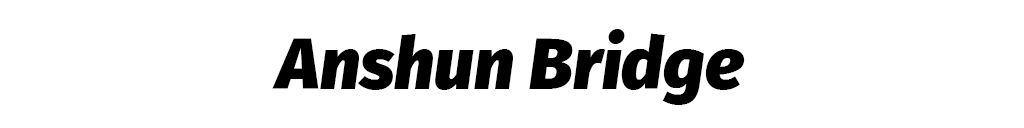
<style>
.page{position:relative;width:1024px;height:128px;background:#ffffff}
.page>*{position:absolute;margin:0}
.t1{font:71.8px "FiraSans-BlackItalic";color:#000000}
</style>
<div class="page">
<p class="t1" style="left:272px;top:29px;width:473px;height:76px">Anshun Bridge</p>
</div>
